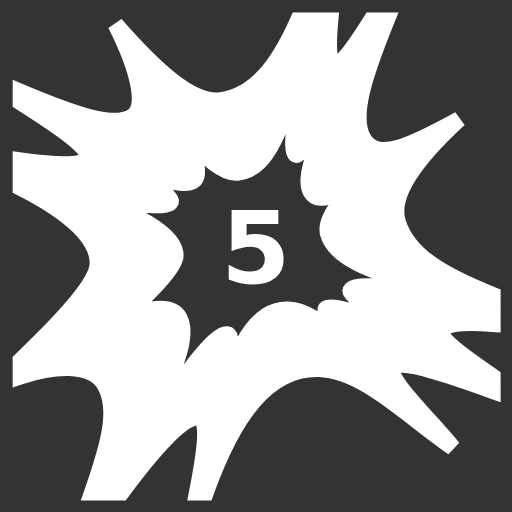
<style>
.page{position:relative;width:512px;height:512px;background:#333333}
.page>*{position:absolute;margin:0}
.t1{font:100px "DejaVuSans-Bold";color:#ffffff}
</style>
<div class="page">
<p class="t1" style="left:228px;top:210px;width:56px;height:75px">5</p>
</div>
